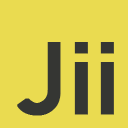
<style>
.page{position:relative;width:128px;height:128px;background:#eadb50}
.page>*{position:absolute;margin:0}
.t1{font:100px "DINAlternate-Bold";color:#353633;font-weight:bold}
</style>
<div class="page">
<p class="t1" style="left:17px;top:42px;width:97px;height:74px">Jii</p>
</div>
